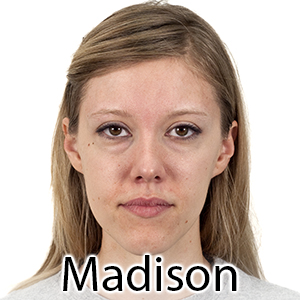
<style>
.page{position:relative;width:300px;height:300px;background:#ffffff}
.page>*{position:absolute;margin:0}
.t1{font:50px "MyriadPro-Regular";color:#000000}
</style>
<div class="page">
<p class="t1" style="left:63px;top:255px;width:174px;height:36px">Madison</p>
</div>
